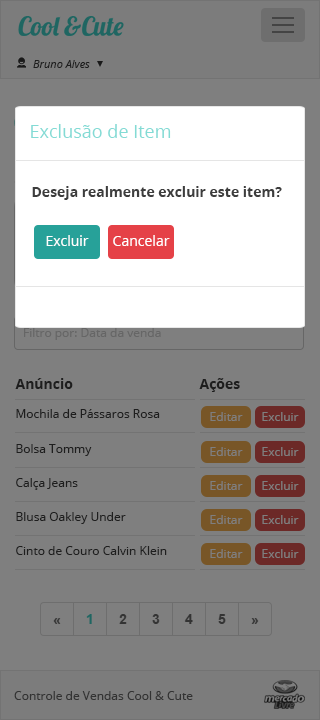
<style>
.page{position:relative;width:320px;height:720px;background:#7f7f7f}
.page>*{position:absolute;margin:0}
.t1{font:11px "OpenSans-Italic";color:#1e1e1e}
.t2{font:18px "OpenSans";color:#83dbd5}
.t3{font:14px "OpenSans-Bold";color:#3d3d3d}
.t4{font:14px "OpenSans";color:#ffffff}
.t5{font:12px "OpenSans";color:#666666}
.t6{font:14px "OpenSans-Bold";color:#1e1e1e}
.t7{font:12px "OpenSans";color:#1e1e1e}
.t8{font:12px "OpenSans";color:#7f7f7f}
.t9{font:12px "OpenSans";color:#333333}
</style>
<div class="page">
<p class="t1" style="left:33px;top:60px;width:57px;height:8px">Bruno Alves</p>
<p class="t2" style="left:31px;top:124px;width:140px;height:14px">Exclusão de Item</p>
<p class="t3" style="left:32px;top:186px;width:250px;height:14px">Deseja realmente excluir este item?</p>
<p class="t4" style="left:46px;top:235px;width:43px;height:11px">Excluir</p>
<p class="t4" style="left:113px;top:235px;width:57px;height:11px">Cancelar</p>
<p class="t5" style="left:24px;top:328px;width:137px;height:12px">Filtro por: Data da venda</p>
<p class="t6" style="left:15px;top:378px;width:58px;height:11px">Anúncio</p>
<p class="t6" style="left:199px;top:378px;width:41px;height:14px">Ações</p>
<p class="t7" style="left:16px;top:409px;width:144px;height:9px">Mochila de Pássaros Rosa</p>
<p class="t8" style="left:210px;top:412px;width:33px;height:9px">Editar</p>
<p class="t8" style="left:262px;top:412px;width:37px;height:9px">Excluir</p>
<p class="t7" style="left:16px;top:444px;width:76px;height:12px">Bolsa Tommy</p>
<p class="t8" style="left:210px;top:447px;width:33px;height:9px">Editar</p>
<p class="t8" style="left:262px;top:447px;width:37px;height:9px">Excluir</p>
<p class="t7" style="left:16px;top:478px;width:62px;height:12px">Calça Jeans</p>
<p class="t8" style="left:210px;top:481px;width:33px;height:9px">Editar</p>
<p class="t8" style="left:262px;top:481px;width:37px;height:9px">Excluir</p>
<p class="t7" style="left:16px;top:512px;width:110px;height:12px">Blusa Oakley Under</p>
<p class="t8" style="left:210px;top:515px;width:33px;height:9px">Editar</p>
<p class="t8" style="left:262px;top:515px;width:37px;height:9px">Excluir</p>
<p class="t7" style="left:16px;top:546px;width:151px;height:9px">Cinto de Couro Calvin Klein</p>
<p class="t8" style="left:210px;top:549px;width:33px;height:9px">Editar</p>
<p class="t8" style="left:262px;top:549px;width:37px;height:9px">Excluir</p>
<p class="t9" style="left:14px;top:691px;width:179px;height:9px">Controle de Vendas Cool &amp; Cute</p>
</div>
